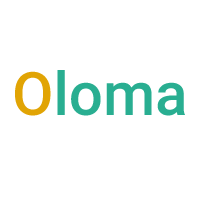
<style>
.page{position:relative;width:200px;height:200px;background:#ffffff}
.page>*{position:absolute;margin:0}
.t1{font:60px "Roboto-Medium";color:#29ae91}
.t2{font:60px "Roboto-Medium";color:#e1a404}
</style>
<div class="page">
<p class="t1" style="left:15px;top:70px;width:170px;height:46px"><span class="t2">O</span>loma</p>
</div>
